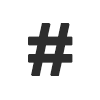
<style>
.page{position:relative;width:100px;height:100px;background:#ffffff}
.page>*{position:absolute;margin:0}
.t1{font:72px "ForteMT";color:#2d2d2d;font-weight:bold}
</style>
<div class="page">
<p class="t1" style="left:28px;top:23px;width:45px;height:53px">#</p>
</div>
